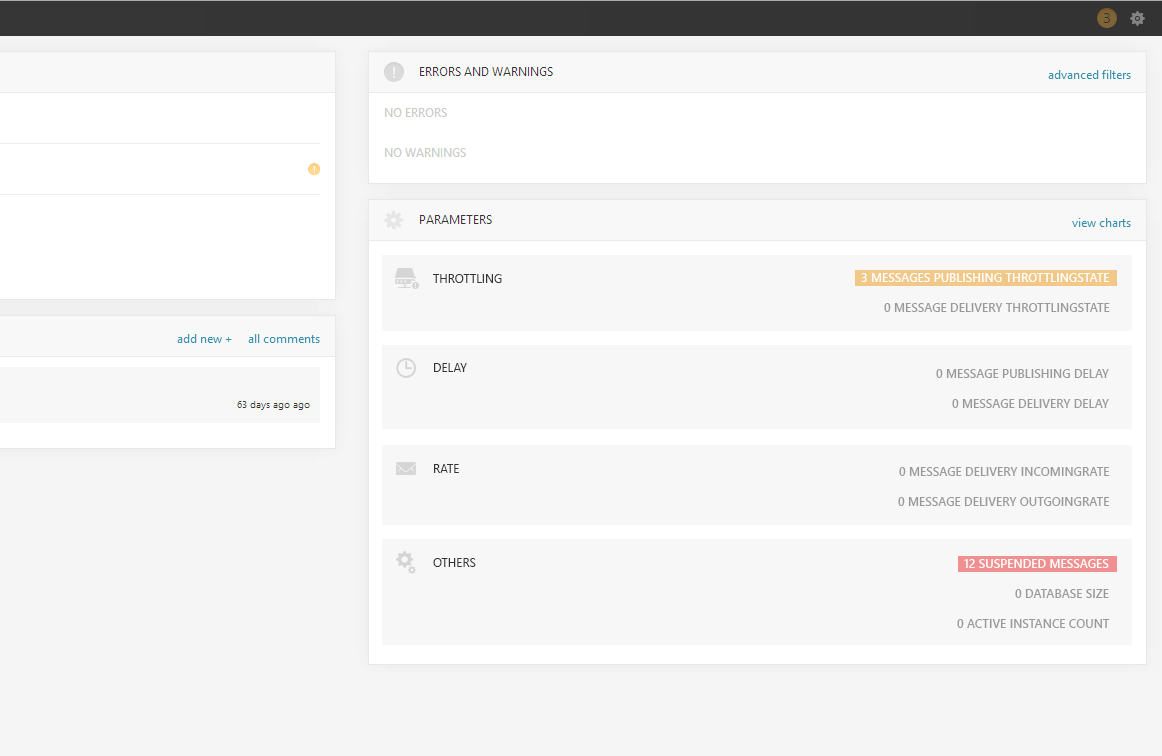
<style>
.page{position:relative;width:1162px;height:756px;background:#f7f7f7}
.page>*{position:absolute;margin:0}
.t1{font:12px "SegoeUI";color:#333333}
.t2{font:12px "SegoeUI-Semibold";color:#ffffff;text-transform:uppercase}
.t3{font:12px "SegoeUI-Semibold";color:#ffffff}
.t4{font:12px "SegoeUI-Semibold";color:#999999;text-transform:uppercase}
</style>
<div class="page">
<p class="t1" style="left:433px;top:274px;width:69px;height:9px">THROTTLING</p>
<p class="t2" style="left:861px;top:273px;width:249px;height:9px"><span class="t3">3 </span>MessageS publishing throttlingState</p>
<p class="t4" style="left:884px;top:303px;width:226px;height:9px">0 Message delivery throttlingState</p>
<p class="t1" style="left:434px;top:363px;width:33px;height:9px">DELAY</p>
<p class="t4" style="left:936px;top:369px;width:173px;height:9px">0 Message publishing delay</p>
<p class="t4" style="left:952px;top:399px;width:157px;height:9px">0 Message delivery delay</p>
<p class="t1" style="left:434px;top:464px;width:25px;height:9px">RATE</p>
<p class="t4" style="left:899px;top:467px;width:211px;height:9px">0 Message delivery incomingRate</p>
<p class="t4" style="left:898px;top:497px;width:212px;height:9px">0 Message delivery outgoingRate</p>
<p class="t1" style="left:433px;top:558px;width:43px;height:9px">OTHERS</p>
<p class="t3" style="left:964px;top:559px;width:145px;height:9px">12 SUSPENDED MESSAGES</p>
<p class="t4" style="left:1015px;top:589px;width:94px;height:9px">0 Database size</p>
<p class="t4" style="left:957px;top:619px;width:153px;height:9px">0 Active instance count</p>
</div>
